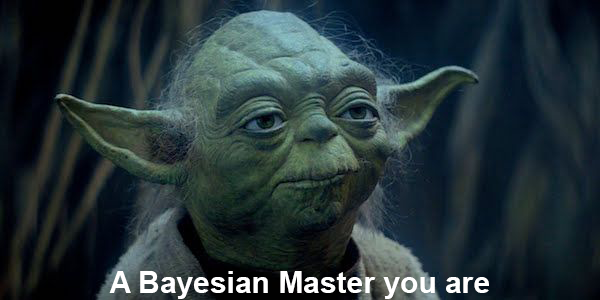
<style>
.page{position:relative;width:600px;height:300px}
.page>*{position:absolute;margin:0}
.t1{font:30px "Arial-BoldMT";color:#ffffff}
</style>
<div class="page">
<p class="t1" style="left:109px;top:271px;width:380px;height:28px">A Bayesian Master you are</p>
</div>
